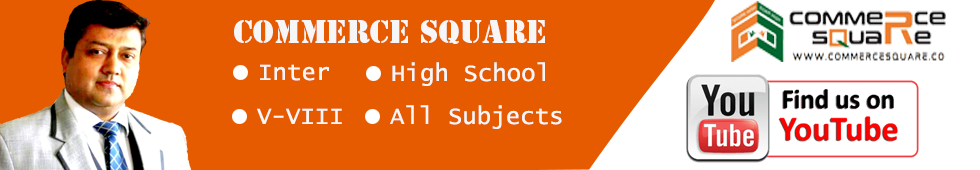
<style>
.page{position:relative;width:980px;height:170px;background:#e65b00}
.page>*{position:absolute;margin:0}
.t1{font:30px "StencilStd";color:#f6f6f6}
.t2{font:24px "LucidaConsole";color:#f6f6f6}
</style>
<div class="page">
<p class="t1" style="left:234px;top:20px;width:311px;height:24px">Commerce Square</p>
<p class="t2" style="left:260px;top:64px;width:69px;height:17px">Inter</p>
<p class="t2" style="left:392px;top:62px;width:153px;height:24px">High School</p>
<p class="t2" style="left:257px;top:108px;width:85px;height:16px">V-VIII</p>
<p class="t2" style="left:390px;top:105px;width:172px;height:24px">All Subjects</p>
</div>
